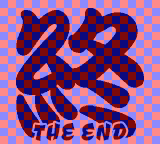
<style>
.page{position:relative;width:160px;height:144px;background:#fe8a8a}
.page>*{position:absolute;margin:0}
.t1{font:31.5px "CevicheOne-Regular";letter-spacing:0.06em;scale:0.84 1}
</style>
<div class="page">
<p class="t1" style="left:33px;top:122px;width:94px;height:19px">THE END</p>
</div>
